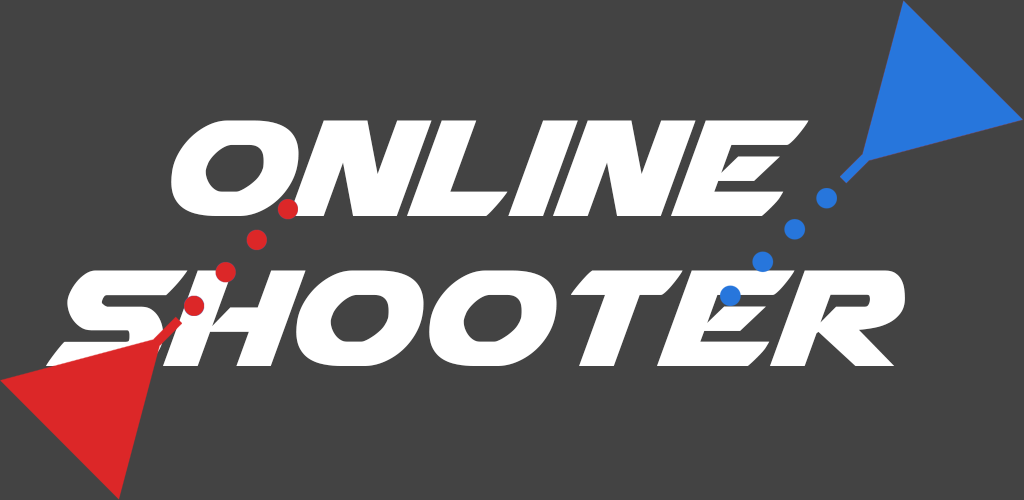
<style>
.page{position:relative;width:1024px;height:500px;background:#434343}
.page>*{position:absolute;margin:0}
.t1{font:180px/150px "Airstrike";color:#ffffff}
</style>
<div class="page">
<p class="t1" style="left:46px;top:120px;width:859px;height:246px;text-align:center">online<br>shooter</p>
</div>
